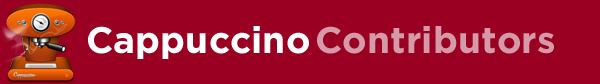
<style>
.page{position:relative;width:600px;height:84px;background:#990022}
.page>*{position:absolute;margin:0}
.t1{font:37px "GothamBold";letter-spacing:0.004em;color:#ffffff}
.t2{font:37px "GothamBold";letter-spacing:0.004em;color:#d699a7}
</style>
<div class="page">
<p class="t1" style="left:88px;top:26px;width:221px;height:33px">Cappuccino</p>
<p class="t2" style="left:317px;top:26px;width:237px;height:28px">Contributors</p>
</div>
